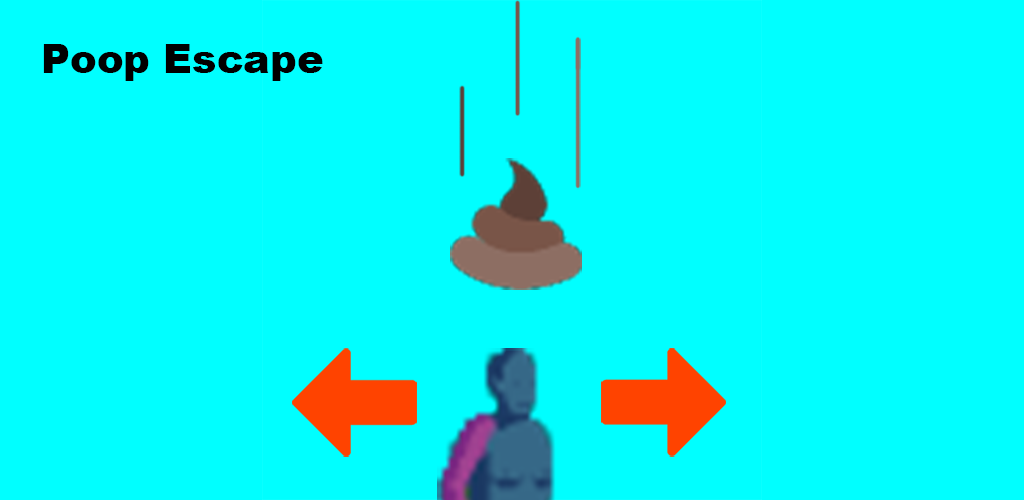
<style>
.page{position:relative;width:1024px;height:500px;background:#00ffff}
.page>*{position:absolute;margin:0}
.t1{font:40px "Arial-Black";color:#000000}
</style>
<div class="page">
<p class="t1" style="left:43px;top:44px;width:280px;height:37px">Poop Escape</p>
</div>
